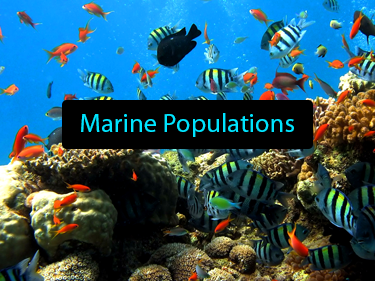
<style>
.page{position:relative;width:375px;height:281px}
.page>*{position:absolute;margin:0}
.t1{font:26.7px "MyriadPro-Regular";color:#00e5ff}
</style>
<div class="page">
<p class="t1" style="left:81px;top:113px;width:213px;height:24px">Marine Populations</p>
</div>
